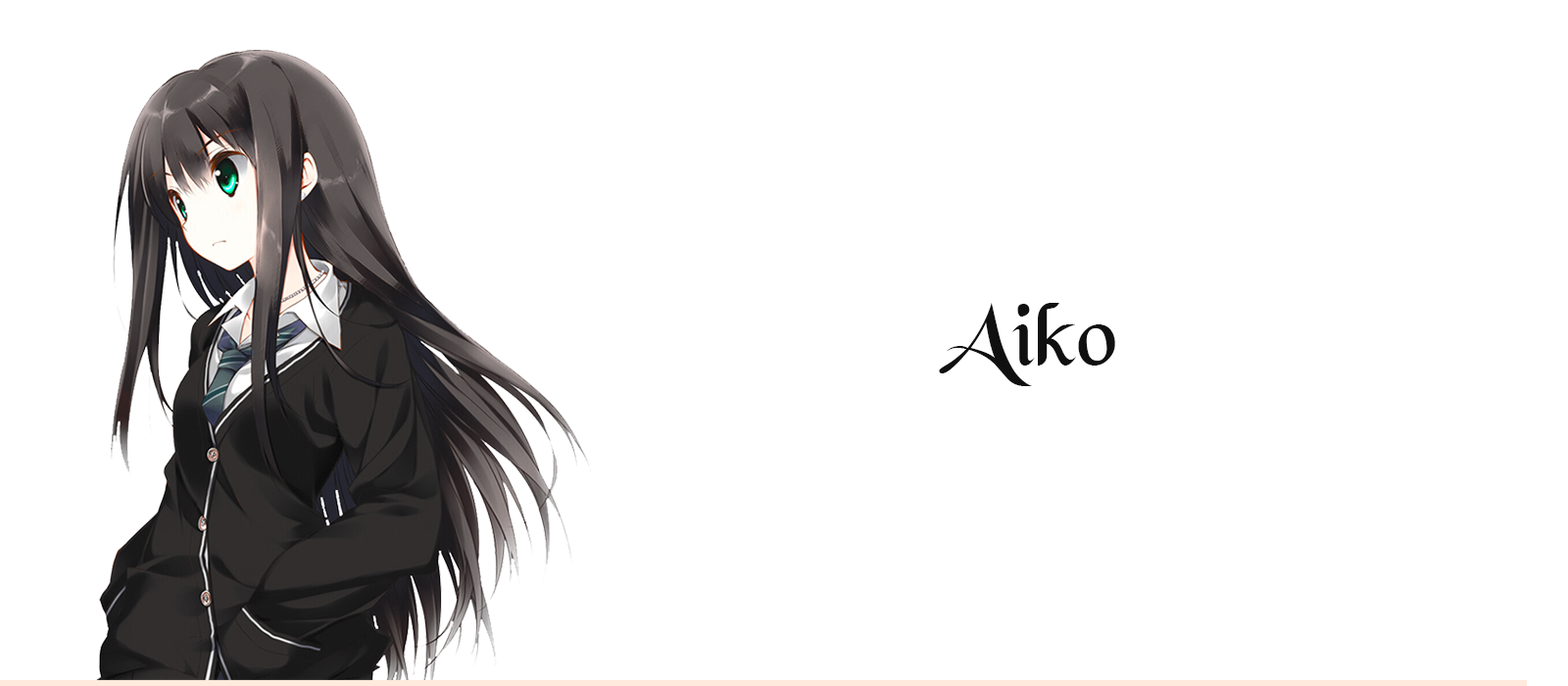
<style>
.page{position:relative;width:1568px;height:686px;background:#ffffff}
.page>*{position:absolute;margin:0}
.t1{font:93.1px "BlackChancery";color:#101010}
</style>
<div class="page">
<p class="t1" style="left:939px;top:303px;width:176px;height:83px">Aiko</p>
</div>
